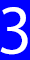
<style>
.page{position:relative;width:30px;height:60px;background:#0000ff}
.page>*{position:absolute;margin:0}
.t1{font:60.7px "KozGoPr6N-Regular";color:#ffffff}
</style>
<div class="page">
<p class="t1" style="left:0px;top:7px;width:28px;height:48px">3</p>
</div>
